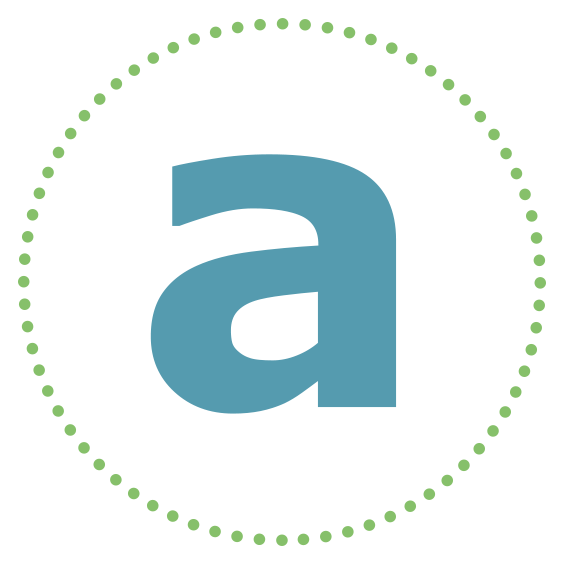
<style>
.page{position:relative;width:564px;height:564px;background:#ffffff}
.page>*{position:absolute;margin:0}
.t1{font:448.2px "Verdana-Bold";color:#559baf}
</style>
<div class="page">
<p class="t1" style="left:150px;top:154px;width:247px;height:260px">a</p>
</div>
